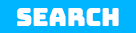
<style>
.page{position:relative;width:136px;height:33px;background:#00b5ff}
.page>*{position:absolute;margin:0}
.t1{font:25px "BungeeLayers-Regular";color:#ffffff}
</style>
<div class="page">
<p class="t1" style="left:17px;top:8px;width:102px;height:18px">SEARCH</p>
</div>
